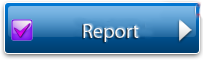
<style>
.page{position:relative;width:204px;height:60px}
.page>*{position:absolute;margin:0}
.t1{font:20px "MyriadPro-Regular";color:#fafafb}
</style>
<div class="page">
<p class="t1" style="left:83px;top:24px;width:56px;height:18px">Report</p>
</div>
